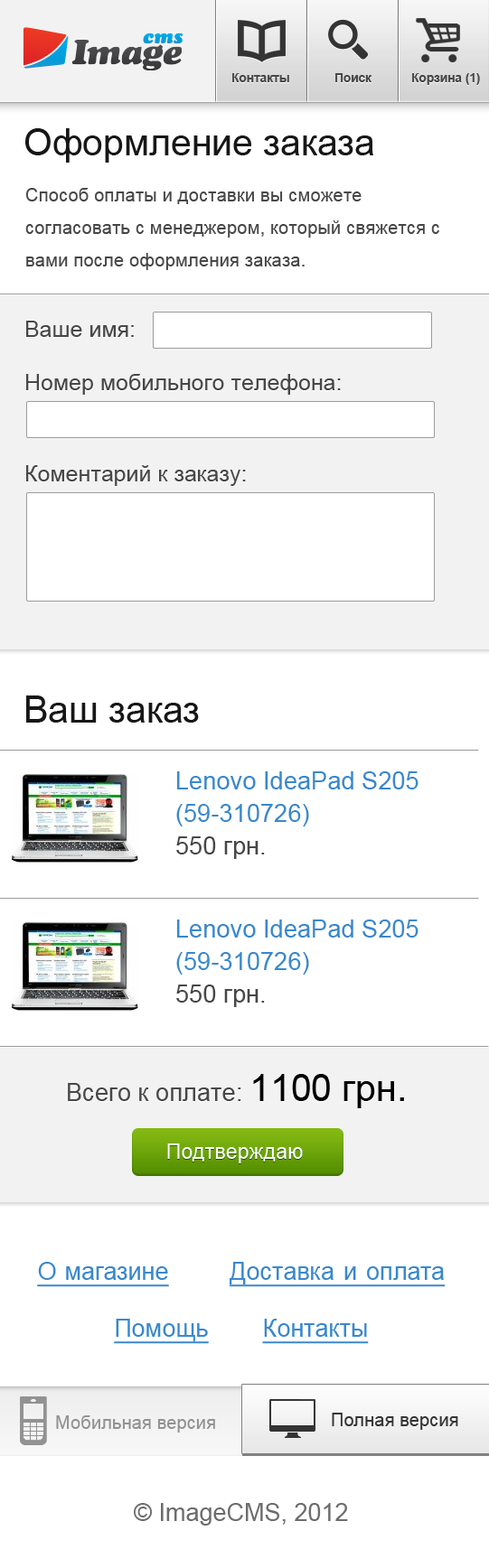
<style>
.page{position:relative;width:489px;height:1568px;background:#ffffff}
.page>*{position:absolute;margin:0}
.t1{font:12.3px "Arial-BoldMT";color:#474749}
.t2{font:36.9px "ArialMT";color:#171717}
.t3{font:18.5px/32.5px "ArialMT";color:#474749}
.t4{font:22.6px "ArialMT";color:#474749}
.t5{font:24.6px/32.5px "ArialMT";color:#3a88cc}
.t6{font:24.6px/32.5px "ArialMT";color:#474749}
.t7{font:24.6px "ArialMT";color:#474749}
.t8{font:36.9px "ArialMT";color:#000000}
.t9{font:20.8px "ArialMT";letter-spacing:0.01em;color:#ffffff}
.t10{font:24.4px/56.9px "ArialMT";color:#3a88cc;text-decoration:underline}
.t11{font:18.3px "ArialMT";color:#929292}
.t12{font:18.3px "ArialMT";color:#343434}
.t13{font:24.4px "ArialMT";color:#6d6d6d}
</style>
<div class="page">
<p class="t1" style="left:232px;top:73px;width:57px;height:9px">Контакты</p>
<p class="t1" style="left:335px;top:73px;width:36px;height:9px">Поиск</p>
<p class="t1" style="left:412px;top:73px;width:68px;height:12px">Корзина (1)</p>
<p class="t2" style="left:25px;top:128px;width:348px;height:35px">Оформление заказа</p>
<p class="t3" style="left:25px;top:188px;width:414px;height:82px">Способ оплаты и доставки вы сможете согласовать с менеджером, который свяжется с вами после оформления заказа.</p>
<p class="t4" style="left:26px;top:321px;width:108px;height:16px">Ваше имя:</p>
<p class="t4" style="left:26px;top:374px;width:315px;height:21px">Номер мобильного телефона:</p>
<p class="t4" style="left:26px;top:465px;width:220px;height:21px">Коментарий к заказу:</p>
<p class="t2" style="left:26px;top:695px;width:173px;height:28px">Ваш заказ</p>
<p class="t5" style="left:176px;top:771px;width:242px;height:88px">Lenovo IdeaPad S205 (59-310726)<br><span class="t6">550 грн.</span></p>
<p class="t5" style="left:176px;top:919px;width:242px;height:88px">Lenovo IdeaPad S205 (59-310726)<br><span class="t6">550 грн.</span></p>
<p class="t7" style="left:68px;top:1074px;width:336px;height:34px">Всего к оплате: <span class="t8">1100 грн.</span></p>
<p class="t9" style="left:167px;top:1143px;width:136px;height:20px">Подтверждаю</p>
<p class="t10" style="left:37px;top:1262px;width:408px;height:82px;text-align:center">Омагазине         Доставкаиоплата           <br>Помощь        Контакты</p>
<p class="t11" style="left:56px;top:1415px;width:159px;height:18px">Мобильная версия</p>
<p class="t12" style="left:331px;top:1413px;width:127px;height:17px">Полная версия</p>
<p class="t13" style="left:134px;top:1503px;width:214px;height:23px">© ImageCMS, 2012</p>
</div>
